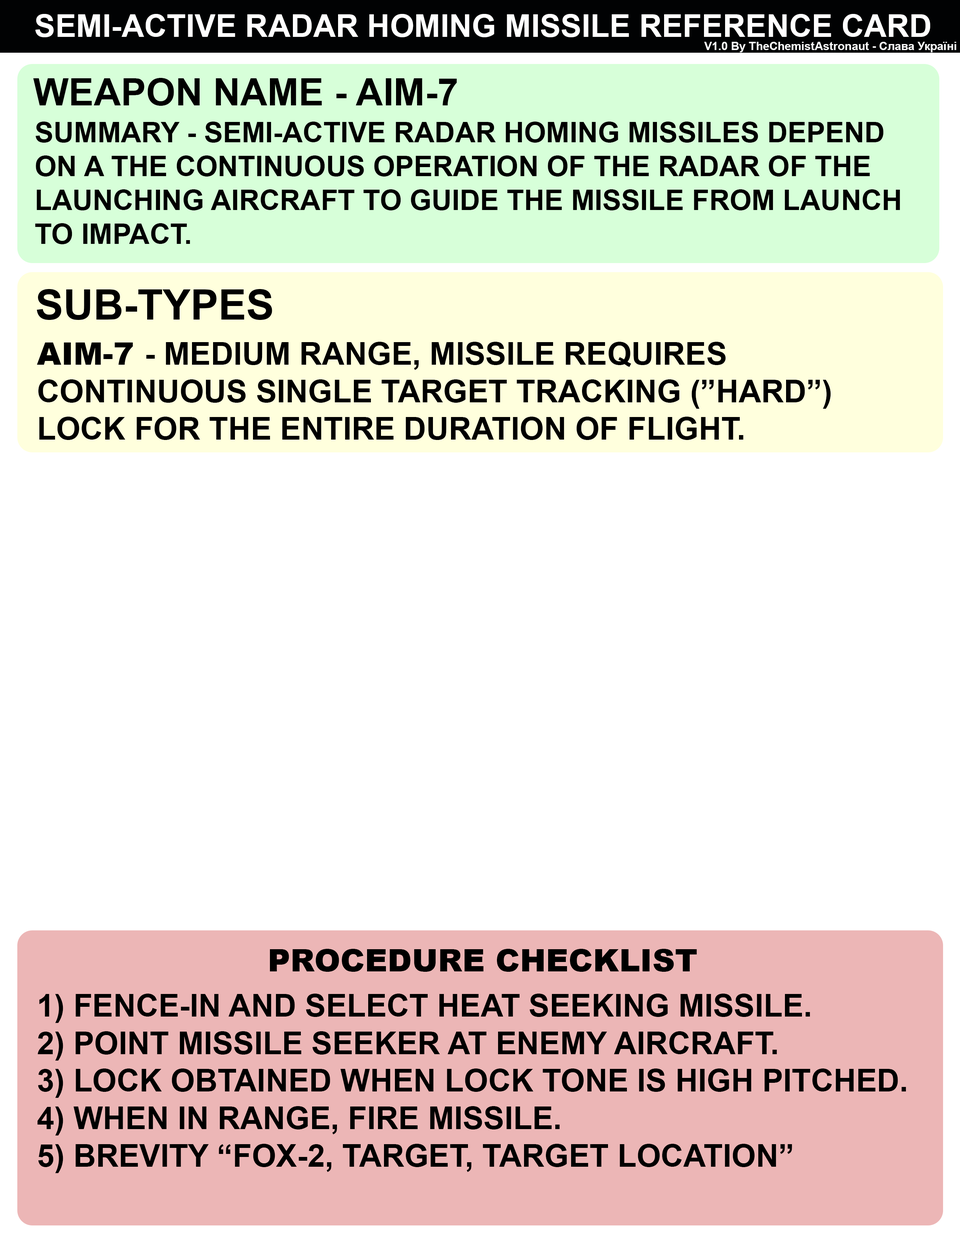
<style>
.page{position:relative;width:960px;height:1242px;background:#ffffff}
.page>*{position:absolute;margin:0}
.t1{font:31.4px "Arial-BoldMT";color:#ffffff}
.t2{font:11.5px "Arial-BoldMT";color:#ffffff}
.t3{font:37.6px "Arial-BoldMT";color:#000000}
.t4{font:28.2px "Arial-BoldMT";color:#000000}
.t5{font:41.7px "Arial-BoldMT";color:#000000}
.t6{font:31.3px "Arial-BoldMT";color:#000000}
.t7{font:31.3px "Arial-Black";color:#000000}
.t8{font:31.4px "Arial-Black";color:#000000}
</style>
<div class="page">
<p class="t1" style="left:35px;top:14px;width:895px;height:23px">SEMI-ACTIVE RADAR HOMING MISSILE REFERENCE CARD</p>
<p class="t2" style="left:704px;top:42px;width:252px;height:10px">V1.0 By TheChemistAstronaut - Слава Україні</p>
<p class="t3" style="left:33px;top:78px;width:424px;height:28px">WEAPON NAME - AIM-7</p>
<p class="t4" style="left:35px;top:122px;width:865px;height:122px">SUMMARY - SEMI-ACTIVE RADAR HOMING MISSILES DEPEND ON A THE CONTINUOUS OPERATION OF THE RADAR OF THE LAUNCHING AIRCRAFT TO GUIDE THE MISSILE FROM LAUNCH TO IMPACT.</p>
<p class="t5" style="left:37px;top:289px;width:235px;height:31px">SUB-TYPES</p>
<p class="t6" style="left:37px;top:342px;width:794px;height:98px"><span class="t7">AIM-7 </span>- MEDIUM RANGE, MISSILE REQUIRES CONTINUOUS SINGLE TARGET TRACKING (”HARD”) LOCK FOR THE ENTIRE DURATION OF FLIGHT.</p>
<p class="t8" style="left:270px;top:949px;width:427px;height:23px">PROCEDURE CHECKLIST</p>
<p class="t6" style="left:37px;top:994px;width:869px;height:179px">1) FENCE-IN AND SELECT HEAT SEEKING MISSILE.<br>2) POINT MISSILE SEEKER AT ENEMY AIRCRAFT.<br>3) LOCK OBTAINED WHEN LOCK TONE IS HIGH PITCHED.<br>4) WHEN IN RANGE, FIRE MISSILE.<br>5) BREVITY “FOX-2, TARGET, TARGET LOCATION”</p>
</div>
